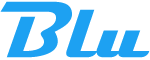
<style>
.page{position:relative;width:150px;height:60px;background:#ffffff}
.page>*{position:absolute;margin:0}
.t1{font:80.8px "Magneto-Bold";color:#1da1f2}
</style>
<div class="page">
<p class="t1" style="left:0px;top:1px;width:150px;height:57px">Blu</p>
</div>
